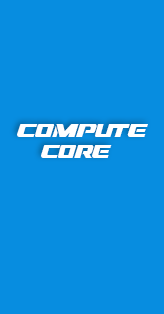
<style>
.page{position:relative;width:164px;height:314px;background:#078de0}
.page>*{position:absolute;margin:0}
.t1{font:19px "DreamMMA";color:#ffffff}
.t2{font:18px "DreamMMA";color:#ffffff}
</style>
<div class="page">
<p class="t1" style="left:17px;top:124px;width:131px;height:34px">compute<br>    <span class="t2">core</span></p>
</div>
